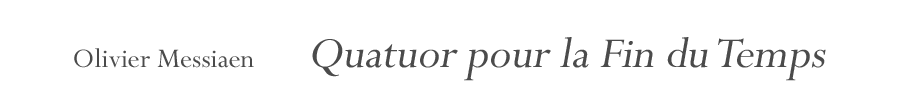
<style>
.page{position:relative;width:900px;height:100px;background:#ffffff}
.page>*{position:absolute;margin:0}
.t1{font:47.8px "Perpetua";color:#4b4b4b;font-style:italic}
.t2{font:29.9px "Perpetua";color:#4b4b4b}
</style>
<div class="page">
<p class="t1" style="left:74px;top:37px;width:752px;height:44px"><span class="t2">Olivier Messiaen     </span>Quatuor pour la Fin du Temps</p>
</div>
